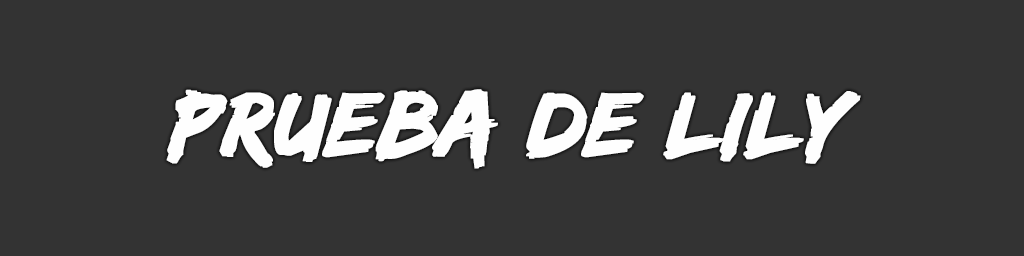
<style>
.page{position:relative;width:1024px;height:256px;background:#333333}
.page>*{position:absolute;margin:0}
.t1{font:94px "EdoSZ";color:#fefefe;font-weight:bold;font-style:italic;scale:1.04 1}
</style>
<div class="page">
<p class="t1" style="left:166px;top:89px;width:695px;height:80px">prueba de lily</p>
</div>
